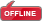
<style>
.page{position:relative;width:42px;height:21px;background:#ffffff}
.page>*{position:absolute;margin:0}
.t1{font:7.3px "Arial-BoldMT";color:#ffffff;text-transform:uppercase}
</style>
<div class="page">
<p class="t1" style="left:4px;top:11px;width:32px;height:5px">offline</p>
</div>
